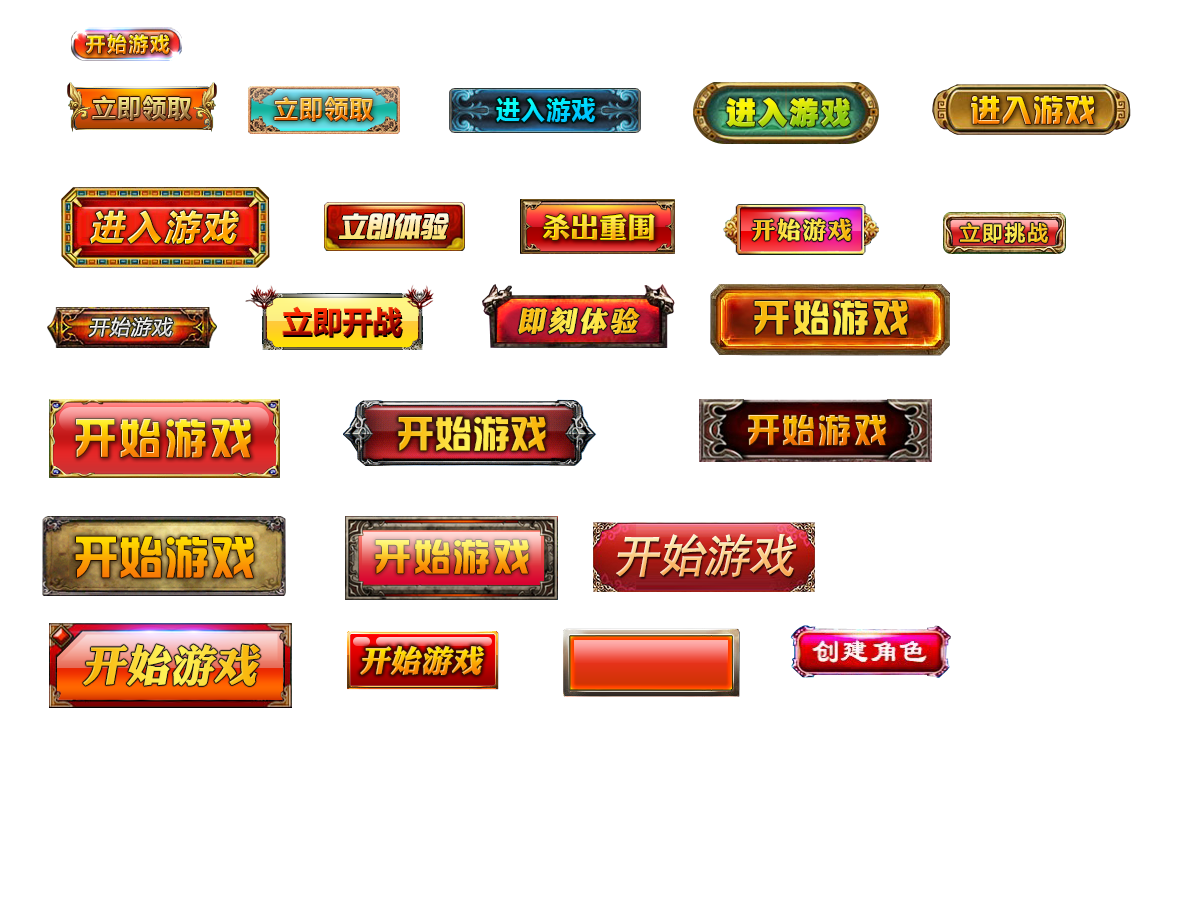
<style>
.page{position:relative;width:1200px;height:900px;background:#ffffff}
.page>*{position:absolute;margin:0}
.t1{font:20px "MicrosoftYaHei-Bold";letter-spacing:0.1em}
.t2{font:24px "MicrosoftYaHei-Bold";letter-spacing:0.05em}
.t3{font:30px "FZCCHK--GBK1-0";letter-spacing:0.05em}
.t4{font:30px "FZHZGBJW--GB1-0";letter-spacing:0.05em}
.t5{font:34px "MicrosoftYaHei-Bold";letter-spacing:0.1em;font-style:italic}
.t6{font:27.2px "FZHZGBJW--GB1-0";font-style:italic}
.t7{font:28px "DFPLiJinHeiW8"}
.t8{font:24px "DFPLiJinHeiW8";letter-spacing:0.05em}
.t9{font:20px "MicrosoftYaHei";letter-spacing:0.1em;font-weight:bold}
.t10{font:36px "FZHZGBJW--GB1-0";letter-spacing:0.1em}
.t11{font:20px "MicrosoftYaHei";letter-spacing:0.05em;color:#f1f1ef;font-style:italic}
.t12{font:30px "MicrosoftYaHei-Bold"}
.t13{font:28px "DFPLiJinHeiW8";letter-spacing:0.1em;font-style:italic}
.t14{font:40.8px "FZHZGBJW--GB1-0";letter-spacing:0.1em}
.t15{font:36px "FZHZGBJW--GB1-0";letter-spacing:0.05em}
.t16{font:32.1px "FZHZGBJW--GB1-0";letter-spacing:0.1em}
.t17{font:45.5px "-G-h-e-i-0-1-m";font-style:italic}
.t18{font:43.4px "FZHZGBJW--GB1-0";letter-spacing:0.05em}
.t19{font:44px "DFPLiJinHeiW8";font-style:italic}
.t20{font:31px "DFPLiJinHeiW8";font-style:italic}
</style>
<div class="page">
<p class="t1" style="left:86px;top:34px;width:84px;height:20px">开始游戏</p>
<p class="t2" style="left:92px;top:96px;width:100px;height:24px">立即领取</p>
<p class="t2" style="left:274px;top:97px;width:100px;height:24px">立即领取</p>
<p class="t2" style="left:496px;top:98px;width:100px;height:24px">进入游戏</p>
<p class="t3" style="left:726px;top:97px;width:124px;height:30px">进入游戏</p>
<p class="t4" style="left:971px;top:95px;width:123px;height:29px">进入游戏</p>
<p class="t5" style="left:90px;top:210px;width:149px;height:34px">进入游戏</p>
<p class="t6" style="left:338px;top:213px;width:111px;height:27px">立即体验</p>
<p class="t7" style="left:543px;top:213px;width:112px;height:28px">杀出重围</p>
<p class="t8" style="left:752px;top:218px;width:100px;height:23px">开始游戏</p>
<p class="t9" style="left:960px;top:222px;width:88px;height:22px">立即挑战</p>
<p class="t10" style="left:754px;top:300px;width:154px;height:35px">开始游戏</p>
<p class="t11" style="left:88px;top:317px;width:85px;height:20px">开始游戏</p>
<p class="t12" style="left:282px;top:306px;width:120px;height:31px">立即开战</p>
<p class="t13" style="left:518px;top:307px;width:122px;height:28px">即刻体验</p>
<p class="t14" style="left:75px;top:419px;width:176px;height:39px">开始游戏</p>
<p class="t15" style="left:398px;top:416px;width:148px;height:35px">开始游戏</p>
<p class="t16" style="left:748px;top:415px;width:138px;height:31px">开始游戏</p>
<p class="t17" style="left:616px;top:534px;width:180px;height:43px">开始游戏</p>
<p class="t18" style="left:75px;top:536px;width:179px;height:42px">开始游戏</p>
<p class="t10" style="left:375px;top:539px;width:154px;height:35px">开始游戏</p>
<p class="t19" style="left:83px;top:644px;width:178px;height:42px">开始游戏</p>
<p class="t20" style="left:360px;top:645px;width:125px;height:30px">开始游戏</p>
</div>
